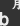
<style>
.page{position:relative;width:20px;height:26px;background:#333333}
.page>*{position:absolute;margin:0}
.t1{font:12px "DFKaiShu-SB-Estd-BF";color:#ececec;font-weight:bold}
.t2{font:18px "ArialMT";color:#ececec;font-weight:bold}
</style>
<div class="page">
<p class="t1" style="left:12px;top:0px;width:9px;height:10px">月</p>
<p class="t2" style="left:0px;top:12px;width:9px;height:14px">b</p>
</div>
